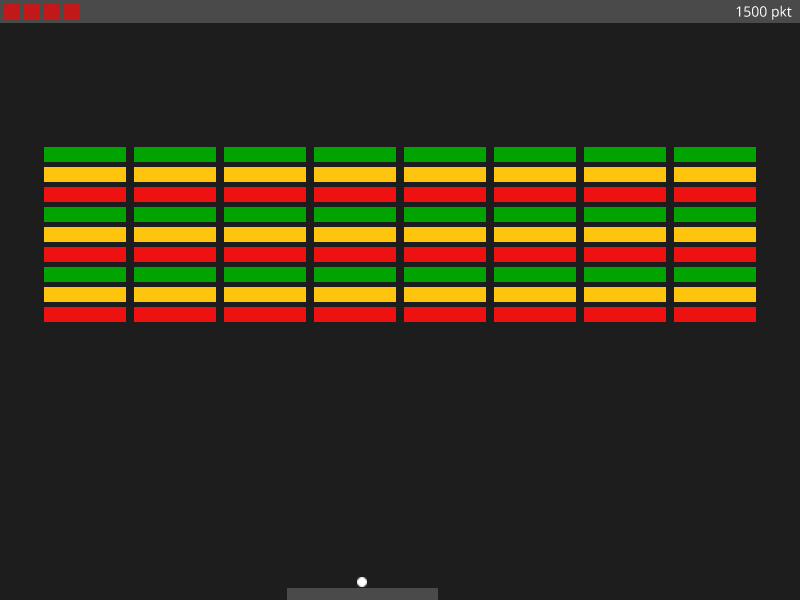
<style>
.page{position:relative;width:800px;height:600px;background:#1d1d1d}
.page>*{position:absolute;margin:0}
.t1{font:14px "OpenSans";color:#ffffff}
</style>
<div class="page">
<p class="t1" style="left:736px;top:5px;width:56px;height:15px">1500 pkt</p>
</div>
